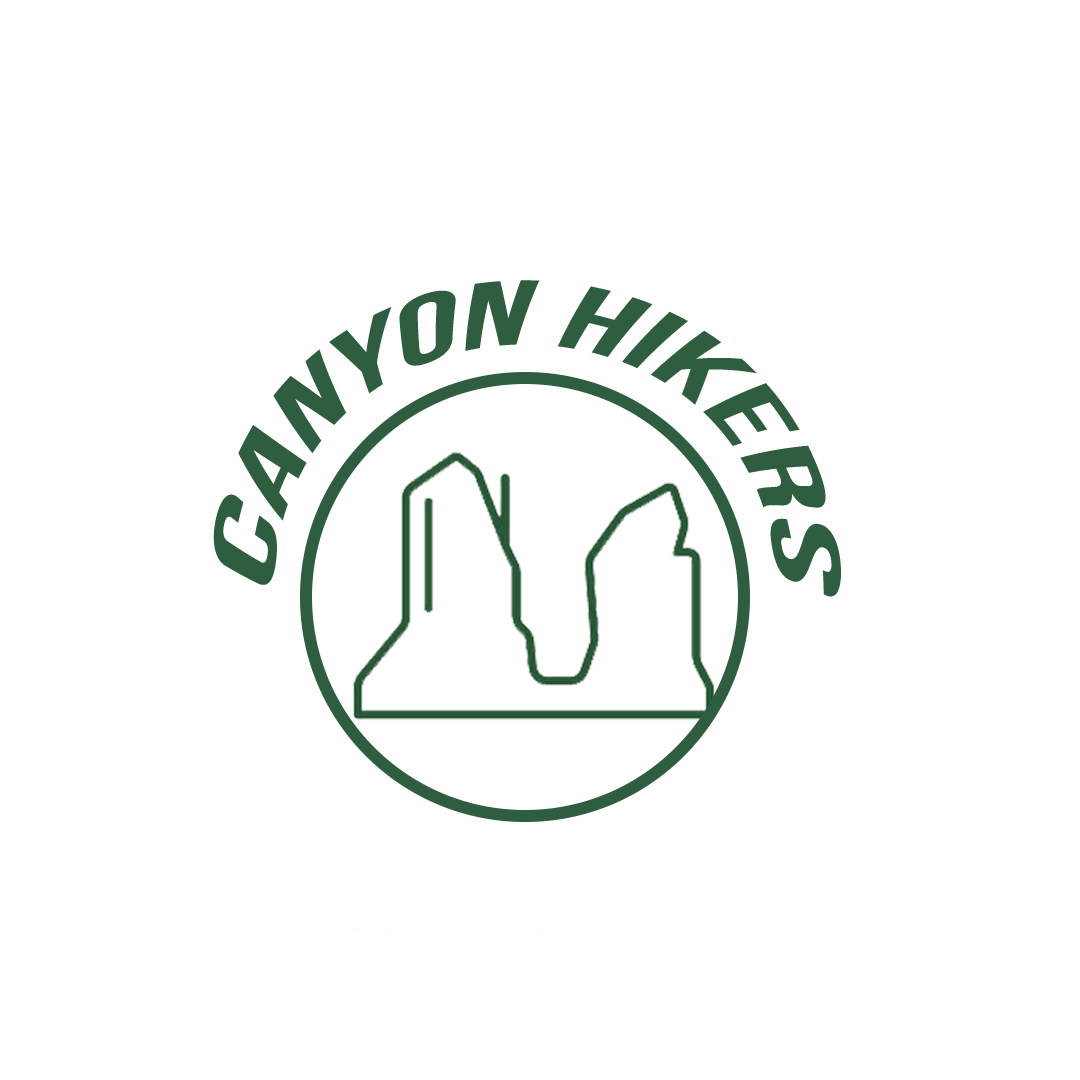
<style>
.page{position:relative;width:1080px;height:1080px;background:#ffffff}
.page>*{position:absolute;margin:0}
.t1{font:91.7px/150px "BebasNeueBold";letter-spacing:0.025em;color:#2e5d40;font-style:italic}
</style>
<div class="page">
<p class="t1" style="left:213px;top:280px;width:628px;height:317px;text-align:center">Canyon Hikers</p>
</div>
